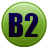
<style>
.page{position:relative;width:48px;height:48px;background:#ffffff}
.page>*{position:absolute;margin:0}
.t1{font:30px "Impact"}
</style>
<div class="page">
<p class="t1" style="left:8px;top:13px;width:31px;height:24px">B2</p>
</div>
